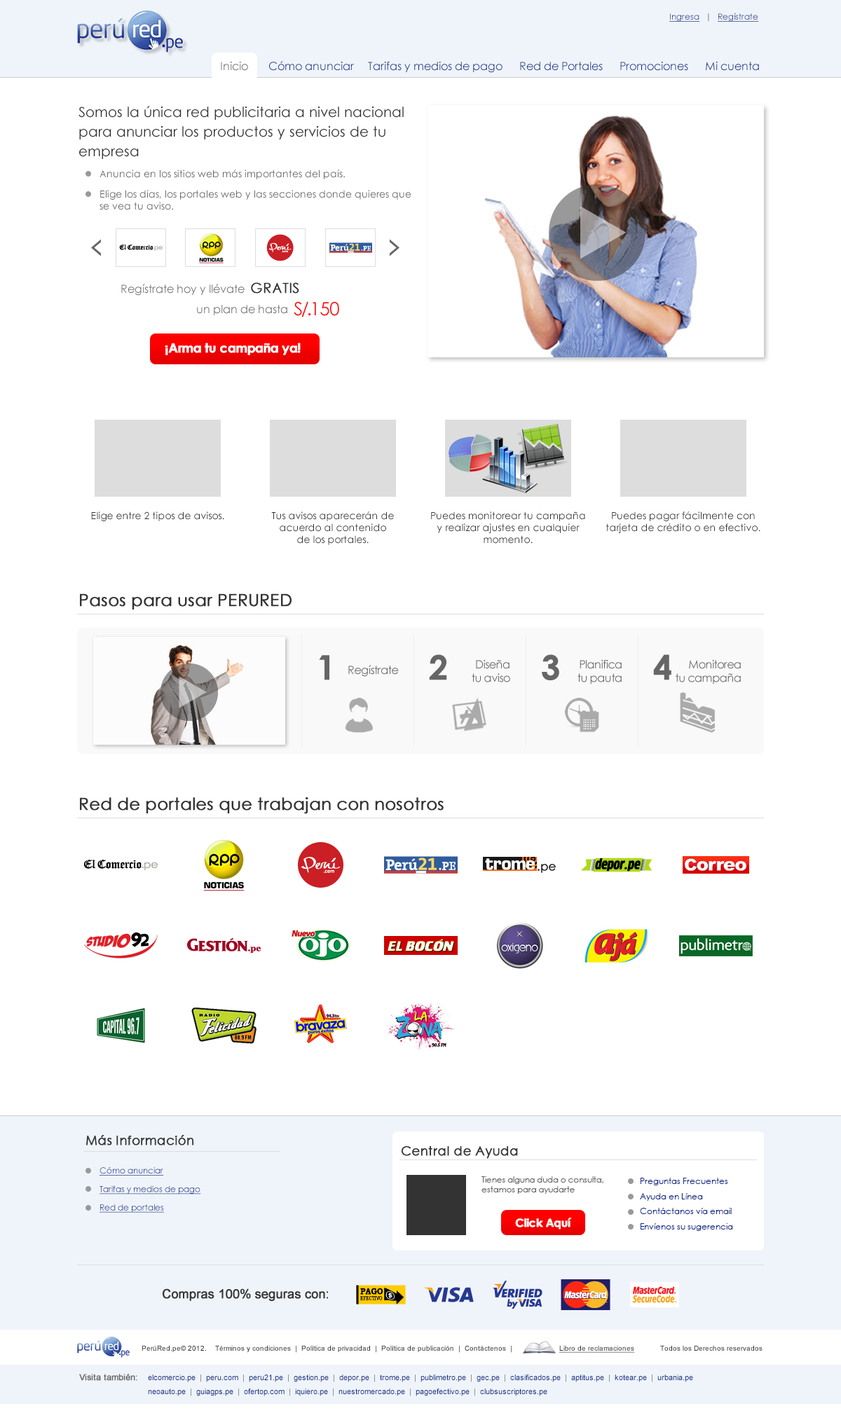
<style>
.page{position:relative;width:841px;height:1418px;background:#ffffff}
.page>*{position:absolute;margin:0}
.t1{font:8.4px "CenturyGothic";color:#0c2a85;text-decoration:underline}
.t2{font:8.4px "CenturyGothic";color:#0c2a85}
.t3{font:11.2px "CenturyGothic";color:#666666}
.t4{font:11.2px "CenturyGothic";color:#0c2a85}
.t5{font:11.2px "CenturyGothic";color:#0c2a86}
.t6{font:14px/19.6px "CenturyGothic";color:#333333}
.t7{font:9.8px "CenturyGothic";color:#666666}
.t8{font:9.8px/11.8px "CenturyGothic";color:#666666}
.t9{font:11.2px/12.3px "CenturyGothic";color:#666666}
.t10{font:14px/15.4px "CenturyGothic";color:#333333;font-weight:bold}
.t11{font:18.2px/20px "CenturyGothic";letter-spacing:-0.1em;color:#ff0000}
.t12{font:18.2px/20px "CenturyGothic";color:#ff0000}
.t13{font:12.6px "CenturyGothic-Bold";letter-spacing:-0.035em;color:#ffffff;font-weight:bold}
.t14{font:9.8px "CenturyGothic";color:#333333}
.t15{font:9.8px/11.8px "CenturyGothic";color:#333333}
.t16{font:16.8px "CenturyGothic";color:#333333;font-weight:bold}
.t17{font:12.6px "CenturyGothic";letter-spacing:0.015em;color:#333333;font-weight:bold}
.t18{font:8.4px/18.5px "CenturyGothic";color:#0c2a86;text-decoration:underline}
.t19{font:8.4px/10.1px "CenturyGothic";letter-spacing:-0.01em;color:#666666}
.t20{font:8.4px/15.2px "CenturyGothic";color:#0c2a86}
.t21{font:11.2px "CenturyGothic-Bold";letter-spacing:-0.035em;color:#ffffff;font-weight:bold}
.t22{font:7px "ArialMT";color:#333333}
.t23{font:7px "ArialMT";color:#333333;text-decoration:underline}
.t24{font:8.4px "ArialMT";color:#666666;font-weight:bold}
.t25{font:7.7px/13.9px "ArialMT";color:#0c2a85}
</style>
<div class="page">
<p class="t1" style="left:669px;top:13px;width:90px;height:9px">Ingresa<span class="t2">   |   </span>Regístrate</p>
<p class="t3" style="left:221px;top:62px;width:27px;height:9px">Inicio</p>
<p class="t4" style="left:269px;top:61px;width:85px;height:10px">Cómo anunciar</p>
<p class="t5" style="left:368px;top:62px;width:134px;height:11px">Tarifas y medios de pago</p>
<p class="t5" style="left:520px;top:62px;width:83px;height:9px">Red de Portales</p>
<p class="t4" style="left:620px;top:62px;width:68px;height:9px">Promociones</p>
<p class="t5" style="left:706px;top:62px;width:53px;height:9px">Mi cuenta</p>
<p class="t6" style="left:78px;top:106px;width:326px;height:53px">Somos la única red publicitaria a nivel nacional para anunciar los productos y servicios de tu empresa</p>
<p class="t7" style="left:99px;top:170px;width:246px;height:9px">Anuncia en los sitios web más importantes del país.</p>
<p class="t8" style="left:99px;top:190px;width:312px;height:20px">Elige los días, los portales web y las secciones donde quieres que se vea tu aviso.</p>
<p class="t9" style="left:121px;top:282px;width:218px;height:35px">Regístrate hoy y llévate  <span class="t10">GRATIS<br>   </span>un plan de hasta  <span class="t11">S/.</span><span class="t12">150</span></p>
<p class="t13" style="left:165px;top:343px;width:136px;height:12px">¡Arma tu campaña ya!</p>
<p class="t14" style="left:91px;top:511px;width:133px;height:10px">Elige entre 2 tipos de avisos.</p>
<p class="t15" style="left:271px;top:511px;width:123px;height:34px;text-align:center">Tus avisos aparecerán de acuerdo al contenido<br>de los portales.</p>
<p class="t15" style="left:431px;top:511px;width:154px;height:33px;text-align:center">Puedes monitorear tu campaña y realizar ajustes en cualquier momento.</p>
<p class="t15" style="left:606px;top:511px;width:154px;height:22px;text-align:center">Puedes pagar fácilmente con tarjeta de crédito o en efectivo.</p>
<p class="t16" style="left:80px;top:593px;width:211px;height:17px">Pasos para usar PERURED</p>
<p class="t16" style="left:80px;top:797px;width:364px;height:17px">Red de portales que trabajan con nosotros</p>
<p class="t17" style="left:86px;top:1135px;width:108px;height:11px">Más Información</p>
<p class="t17" style="left:401px;top:1146px;width:117px;height:13px">Central de Ayuda</p>
<p class="t18" style="left:99px;top:1167px;width:102px;height:46px">Cómo anunciar<br>Tarifas y medios de pago<br>Red de portales</p>
<p class="t19" style="left:481px;top:1176px;width:122px;height:18px">Tienes alguna duda o consulta, estamos para ayudarte</p>
<p class="t20" style="left:640px;top:1178px;width:93px;height:53px">Preguntas Frecuentes<br>Ayuda en Línea<br>Contáctanos vía email<br>Envíenos su sugerencia</p>
<p class="t21" style="left:515px;top:1218px;width:57px;height:12px">Click Aquí</p>
<p class="t22" style="left:142px;top:1345px;width:369px;height:8px">PerúRed.pe© 2012.    Términos y condiciones  |  Política de privacidad  |  Política de publicación  |  Contáctenos  |</p>
<p class="t23" style="left:559px;top:1345px;width:76px;height:8px">Libro de reclamaciones</p>
<p class="t22" style="left:660px;top:1345px;width:102px;height:6px">Todos los Derechos reservados</p>
<p class="t24" style="left:79px;top:1374px;width:58px;height:7px">Visita también:</p>
<p class="t25" style="left:148px;top:1375px;width:545px;height:21px">elcomercio.pe  |  peru.com  |  peru21.pe  |  gestion.pe  |  depor.pe  |  trome.pe  |  publimetro.pe  |  gec.pe  |  clasificados.pe  |  aptitus.pe  |  kotear.pe  |  urbania.pe<br>neoauto.pe  |  guiagps.pe  |  ofertop.com  |  iquiero.pe  |  nuestromercado.pe  |  pagoefectivo.pe  |  clubsuscriptores.pe</p>
</div>
